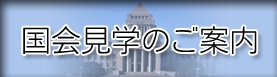
<style>
.page{position:relative;width:277px;height:77px}
.page>*{position:absolute;margin:0}
.t1{font:30px "FMotoyaCedar-W1-90mskp-RKSJ-H";color:#000000}
</style>
<div class="page">
<p class="t1" style="left:23px;top:26px;width:234px;height:29px">国会見学のご案内</p>
</div>
